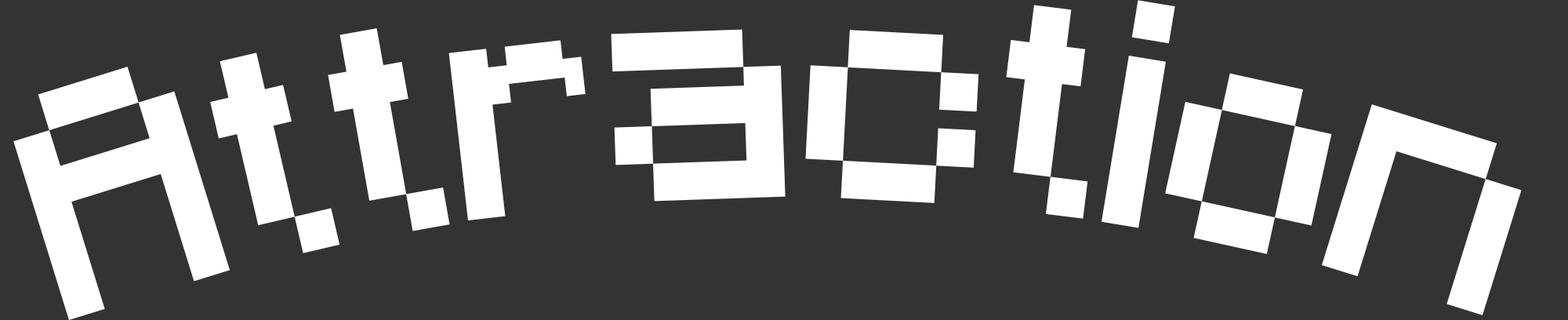
<style>
.page{position:relative;width:1568px;height:320px;background:#333333}
.page>*{position:absolute;margin:0}
.t1{font:299.2px "Minecraft";color:#ffffff}
</style>
<div class="page">
<p class="t1" style="left:13px;top:0px;width:1509px;height:320px">Attraction</p>
</div>
